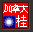
<style>
.page{position:relative;width:33px;height:32px;background:#f20000}
.page>*{position:absolute;margin:0}
.t1{font:10.4px "SimSun";letter-spacing:-0.25em;color:#ffffff}
.t2{font:11.7px "SimSun";color:#ffffff}
</style>
<div class="page">
<p class="t1" style="left:3px;top:4px;width:25px;height:9px">加拿大</p>
<p class="t2" style="left:16px;top:15px;width:11px;height:12px">桂</p>
</div>
